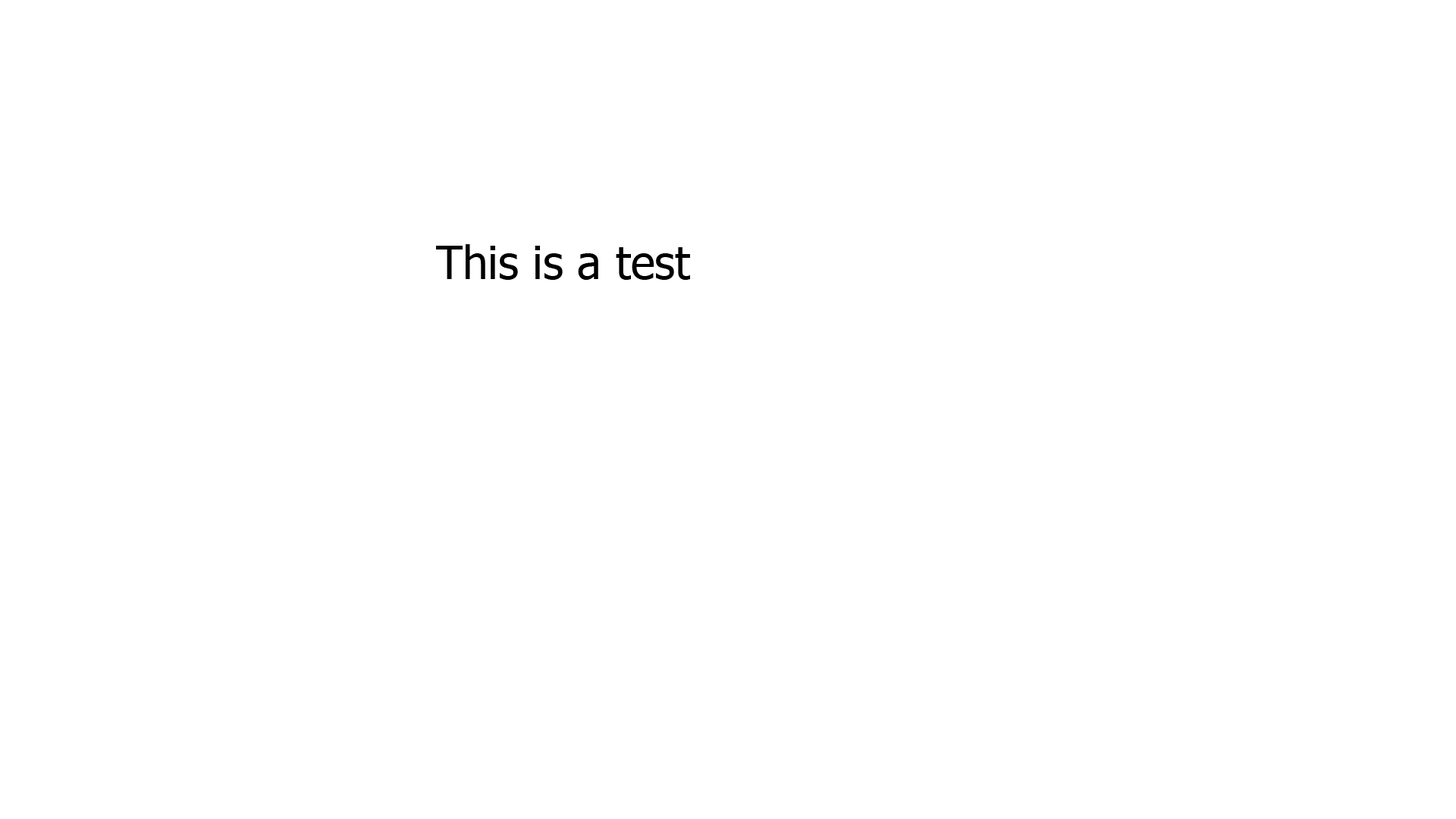
<style>
.page{position:relative;width:1456px;height:819px;background:#ffffff}
.page>*{position:absolute;margin:0}
.t1{font:45.5px "Tahoma";color:#000000}
</style>
<div class="page">
<p class="t1" style="left:436px;top:244px;width:254px;height:36px">This is a test</p>
</div>
